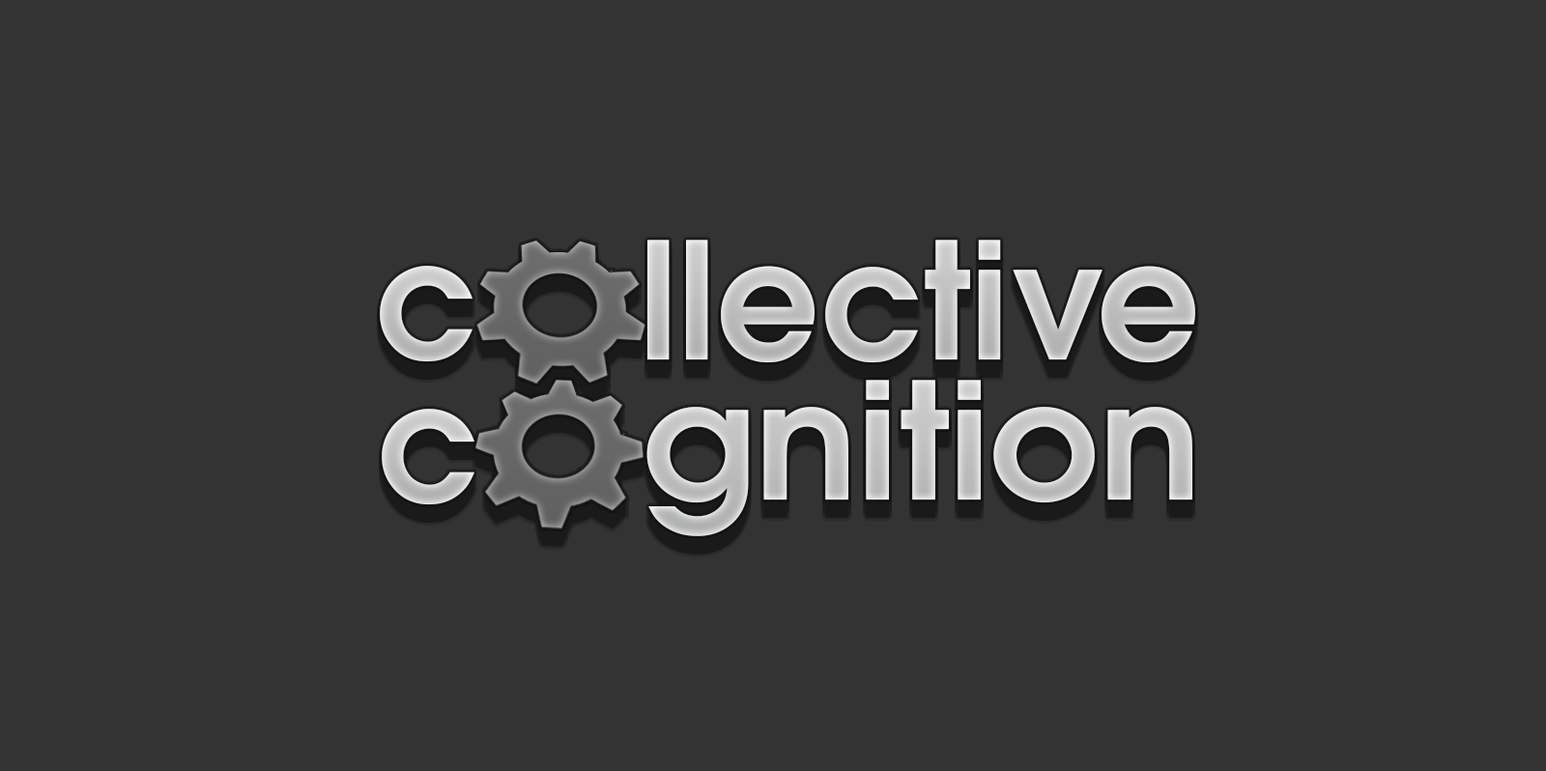
<style>
.page{position:relative;width:1546px;height:771px;background:#333333}
.page>*{position:absolute;margin:0}
.t1{font:161.1px "AvantGardeCE-Demi";color:#c9c9c9}
.t2{font:161.1px "AvantGardeCE-Demi";color:#cccccc}
.t3{font:161.1px "AvantGardeCE-Demi";color:#c9caca;scale:1.06 1}
</style>
<div class="page">
<p class="t1" style="left:647px;top:240px;width:548px;height:123px">llective</p>
<p class="t2" style="left:380px;top:266px;width:93px;height:96px">c</p>
<p class="t3" style="left:647px;top:380px;width:546px;height:156px">gnition</p>
<p class="t2" style="left:382px;top:409px;width:93px;height:96px">c</p>
</div>
